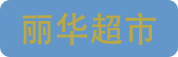
<style>
.page{position:relative;width:178px;height:57px;background:#6396c9}
.page>*{position:absolute;margin:0}
.t1{font:34.5px "STHeitiTC-Medium";color:#bba846}
</style>
<div class="page">
<p class="t1" style="left:22px;top:12px;width:134px;height:33px">丽华超市</p>
</div>
